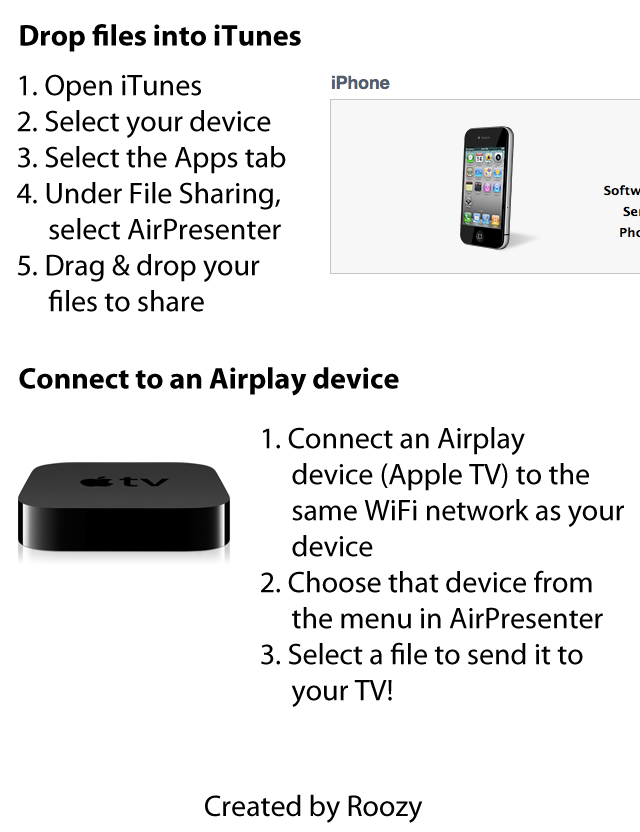
<style>
.page{position:relative;width:640px;height:832px;background:#ffffff}
.page>*{position:absolute;margin:0}
.t1{font:30px "MyriadPro-Bold";color:#000000}
.t2{font:30px/36px "MyriadPro-Regular";color:#000000}
.t3{font:30px "MyriadPro-Regular";color:#000000}
</style>
<div class="page">
<p class="t1" style="left:20px;top:24px;width:281px;height:28px">Drop files into iTunes</p>
<p class="t2" style="left:17px;top:74px;width:269px;height:238px">1. Open iTunes<br>2. Select your device<br>3. Select the Apps tab<br>4. Under File Sharing,<br>     select AirPresenter<br>5. Drag &amp; drop your<br>     files to share</p>
<p class="t1" style="left:19px;top:367px;width:380px;height:29px">Connect to an Airplay device</p>
<p class="t2" style="left:261px;top:427px;width:363px;height:280px">1. Connect an Airplay<br>     device (Apple TV) to the<br>     same WiFi network as your<br>     device<br>2. Choose that device from<br>     the menu in AirPresenter<br>3. Select a file to send it to<br>     your TV!</p>
<p class="t3" style="left:205px;top:794px;width:218px;height:29px">Created by Roozy</p>
</div>
